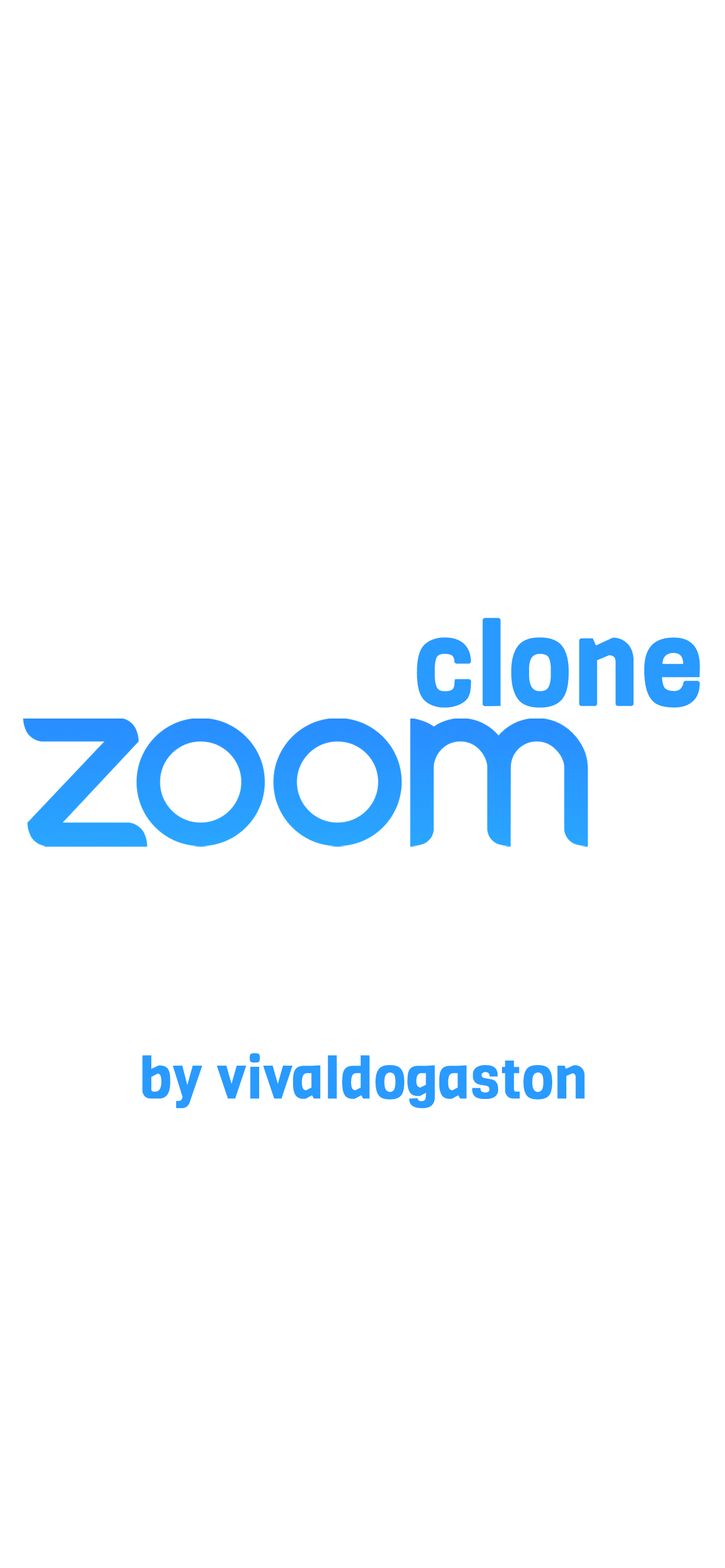
<style>
.page{position:relative;width:725px;height:1568px;background:#ffffff}
.page>*{position:absolute;margin:0}
.t1{font:112.9px "Viga-Regular";color:#299aff;font-weight:bold}
.t2{font:56.4px "Viga-Regular";color:#299aff;font-weight:bold}
</style>
<div class="page">
<p class="t1" style="left:417px;top:617px;width:283px;height:91px">clone</p>
<p class="t2" style="left:142px;top:1053px;width:443px;height:56px">by vivaldogaston</p>
</div>
